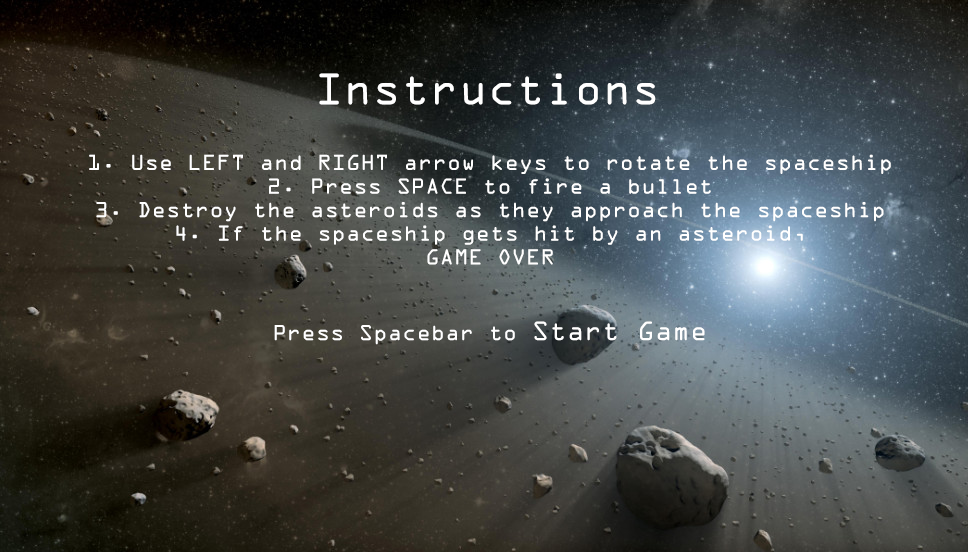
<style>
.page{position:relative;width:968px;height:552px}
.page>*{position:absolute;margin:0}
.t1{font:40px "OCRAStd";color:#ffffff}
.t2{font:19.7px "OCRAStd";color:#ffffff}
.t3{font:24px "OCRAStd";color:#ffffff}
</style>
<div class="page">
<p class="t1" style="left:319px;top:73px;width:337px;height:32px">Instructions</p>
<p class="t2" style="left:89px;top:154px;width:802px;height:191px;text-align:center">1. Use LEFT and RIGHT arrow keys to rotate the spaceship<br>2. Press SPACE to fire a bullet<br>3. Destroy the asteroids as they approach the spaceship<br>4. If the spaceship gets hit by an asteroid,<br>GAME OVER<br><br><br>Press Spacebar to <span class="t3">Start Game</span></p>
</div>
